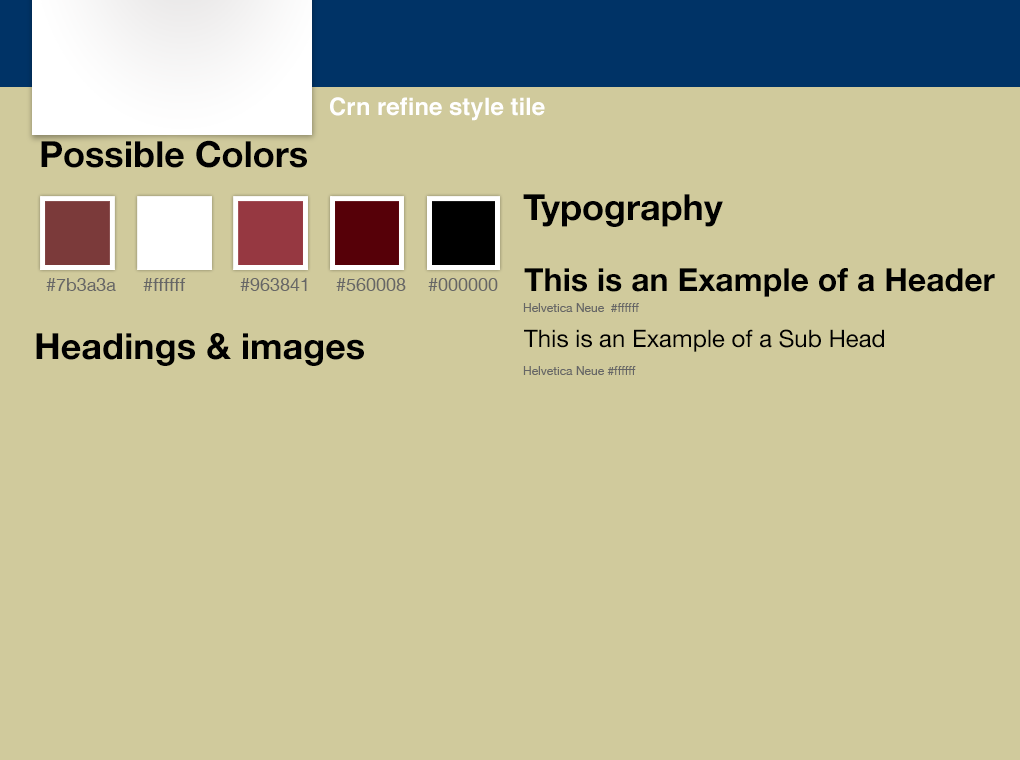
<style>
.page{position:relative;width:1020px;height:760px;background:#d0ca9c}
.page>*{position:absolute;margin:0}
.t1{font:24px "Helvetica-Bold";color:#ffffff}
.t2{font:36px "HelveticaNeue-Bold";color:#000000}
.t3{font:32px "HelveticaNeue-Bold";color:#000000}
.t4{font:18px "HelveticaNeue";color:#666666}
.t5{font:12px "HelveticaNeue";color:#666666}
.t6{font:24px "HelveticaNeue";color:#000000}
</style>
<div class="page">
<p class="t1" style="left:330px;top:97px;width:215px;height:24px">Crn refine style tile</p>
<p class="t2" style="left:41px;top:140px;width:266px;height:28px">Possible Colors</p>
<p class="t2" style="left:523px;top:194px;width:200px;height:33px">Typography</p>
<p class="t3" style="left:524px;top:268px;width:471px;height:29px">This is an Example of a Header</p>
<p class="t4" style="left:46px;top:278px;width:70px;height:13px">#7b3a3a</p>
<p class="t4" style="left:143px;top:278px;width:43px;height:13px">#ffffff</p>
<p class="t4" style="left:240px;top:278px;width:67px;height:13px">#963841</p>
<p class="t4" style="left:336px;top:278px;width:70px;height:13px">#560008</p>
<p class="t4" style="left:428px;top:278px;width:70px;height:13px">#000000</p>
<p class="t5" style="left:523px;top:303px;width:116px;height:9px">Helvetica Neue  #ffffff</p>
<p class="t6" style="left:524px;top:329px;width:360px;height:23px">This is an Example of a Sub Head</p>
<p class="t2" style="left:36px;top:333px;width:328px;height:33px">Headings &amp; images</p>
<p class="t5" style="left:523px;top:366px;width:113px;height:9px">Helvetica Neue #ffffff</p>
</div>
